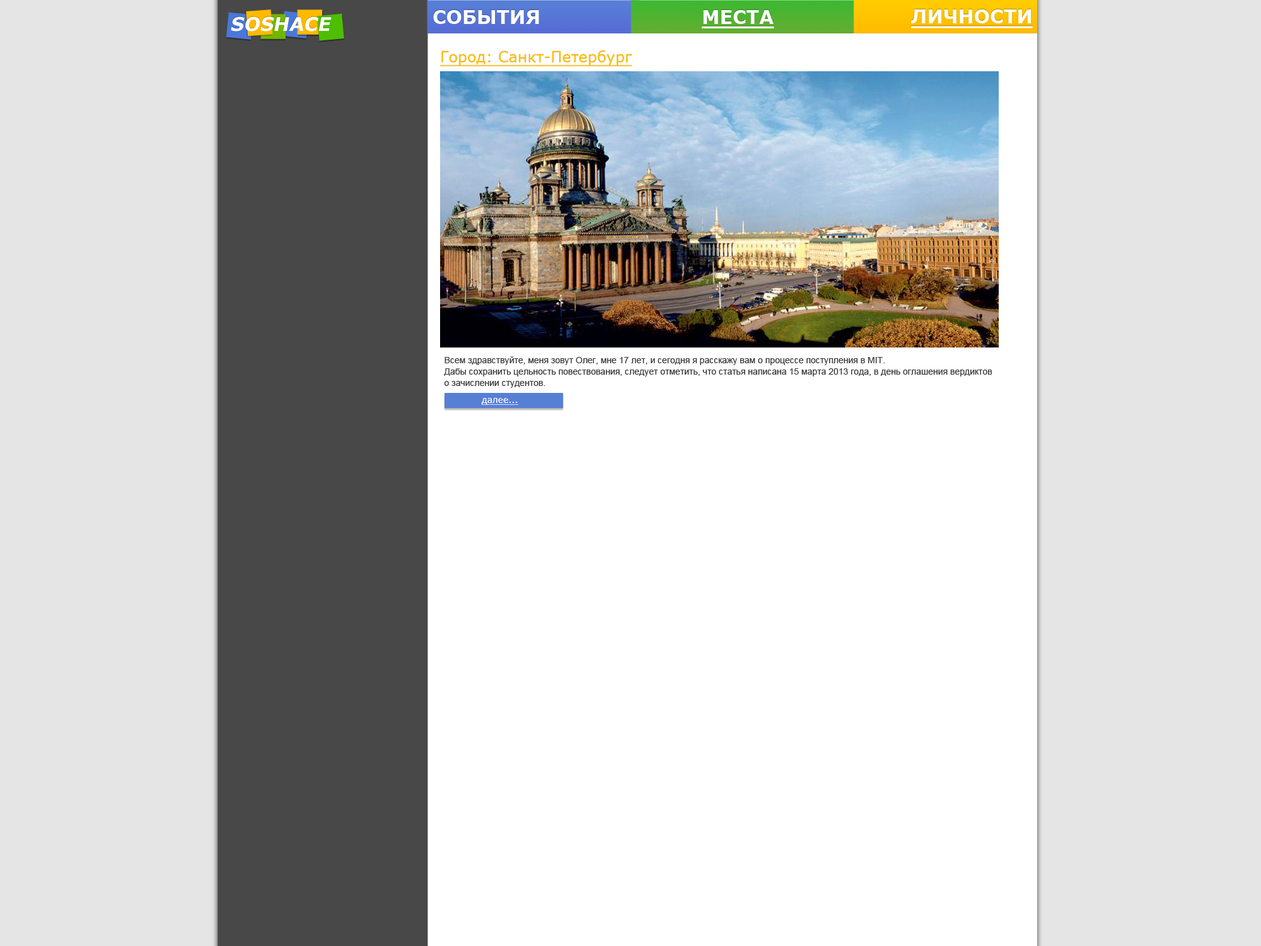
<style>
.page{position:relative;width:1261px;height:946px;background:#e5e5e5}
.page>*{position:absolute;margin:0}
.t1{font:18.9px "Verdana-Bold";color:#ffffff;font-style:italic}
.t2{font:18.9px "Verdana-Bold";color:#ffffff}
.t3{font:18.6px "Verdana-Bold";color:#ffffff;text-decoration:underline}
.t4{font:18.9px "Verdana-Bold";color:#ffffff;text-decoration:underline}
.t5{font:15.1px "Verdana";color:#ffba00;text-decoration:underline}
.t6{font:8.8px/11.3px "ArialMT";color:#393939}
.t7{font:8.8px "Verdana";color:#ffffff;text-decoration:underline}
</style>
<div class="page">
<p class="t1" style="left:231px;top:16px;width:101px;height:16px">SOSHACE</p>
<p class="t2" style="left:433px;top:10px;width:106px;height:14px">СОБЫТИЯ</p>
<p class="t3" style="left:702px;top:10px;width:72px;height:18px">МЕСТА</p>
<p class="t4" style="left:911px;top:9px;width:122px;height:19px">ЛИЧНОСТИ</p>
<p class="t5" style="left:440px;top:50px;width:192px;height:16px">Город: Санкт-Петербург</p>
<p class="t6" style="left:444px;top:356px;width:548px;height:32px">Всем здравствуйте, меня зовут Олег, мне 17 лет, и сегодня я расскажу вам о процессе поступления в MIT.<br>Дабы сохранить цельность повествования, следует отметить, что статья написана 15 марта 2013 года, в день оглашения вердиктов <br>о зачислении студентов.</p>
<p class="t7" style="left:481px;top:398px;width:37px;height:7px">далее...</p>
</div>
